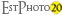
<style>
.page{position:relative;width:64px;height:15px;background:#ffffff}
.page>*{position:absolute;margin:0}
.t1{font:12.3px "TrajanPro-Regular";color:#676767}
.t2{font:8.2px "TrajanPro-Regular";color:#676767}
.t3{font:16.4px "TrajanPro-Regular";color:#676767}
</style>
<div class="page">
<p class="t1" style="left:1px;top:1px;width:8px;height:13px">E</p>
<p class="t2" style="left:8px;top:5px;width:11px;height:6px">st</p>
<p class="t3" style="left:18px;top:1px;width:8px;height:13px">P</p>
<p class="t2" style="left:26px;top:5px;width:24px;height:6px">hoto</p>
</div>
